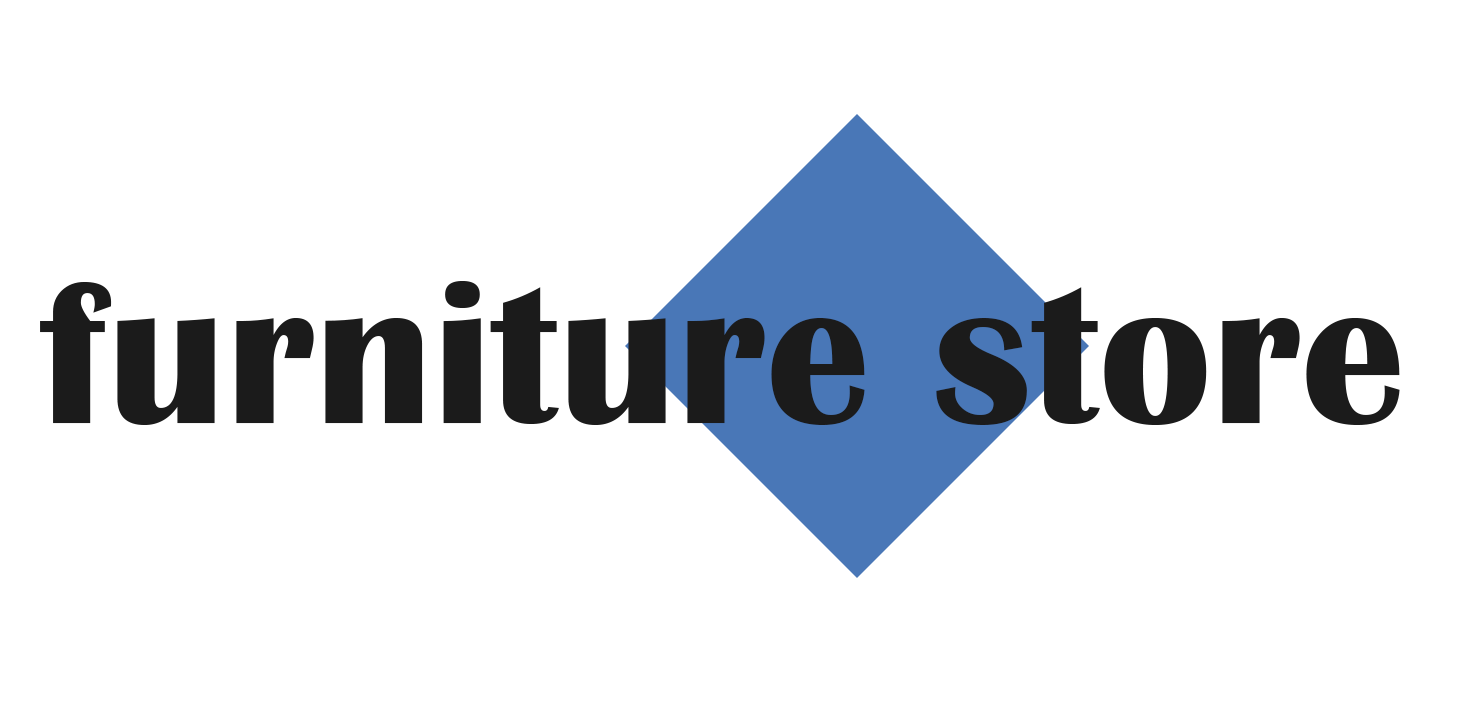
<style>
.page{position:relative;width:1462px;height:701px;background:#ffffff}
.page>*{position:absolute;margin:0}
.t1{font:208.3px "BritannicBold";color:#1b1b1b}
</style>
<div class="page">
<p class="t1" style="left:40px;top:281px;width:1360px;height:144px">furniture store</p>
</div>
